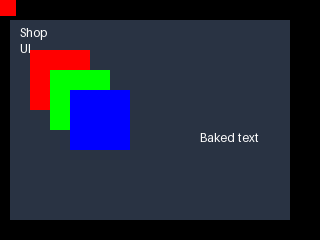
<style>
.page{position:relative;width:320px;height:240px;background:#293343}
.page>*{position:absolute;margin:0}
.t1{font:12px "Arial";color:#ffffff}
</style>
<div class="page">
<p class="t1" style="left:20px;top:25px;width:90px;height:32px">Shop<br>UI</p>
<p class="t1" style="left:200px;top:130px;width:90px;height:32px">Baked text</p>
</div>
